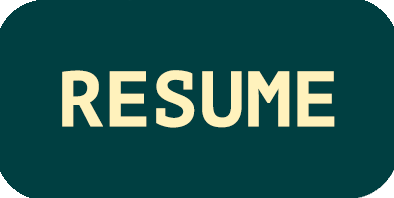
<style>
.page{position:relative;width:394px;height:198px;background:#003f41}
.page>*{position:absolute;margin:0}
.t1{font:78.2px "PTMono-Bold";color:#fff2bc}
</style>
<div class="page">
<p class="t1" style="left:62px;top:70px;width:273px;height:58px">RESUME</p>
</div>
